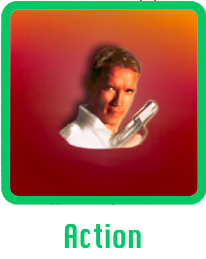
<style>
.page{position:relative;width:206px;height:259px}
.page>*{position:absolute;margin:0}
.t1{font:31.5px "Krungthep";color:#00c864;scale:0.74 1}
</style>
<div class="page">
<p class="t1" style="left:64px;top:224px;width:77px;height:24px">Action</p>
</div>
